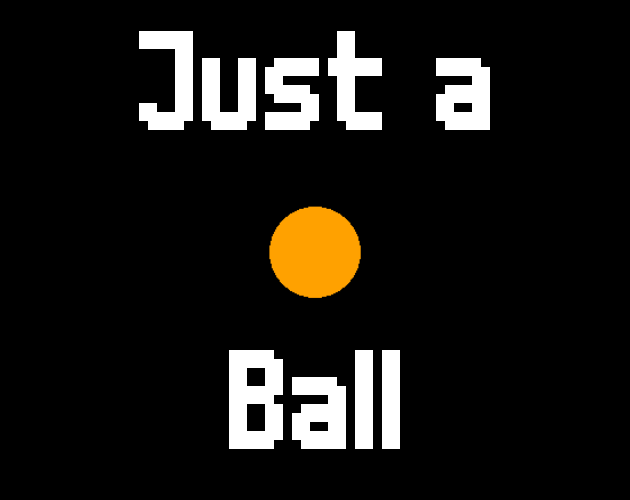
<style>
.page{position:relative;width:630px;height:500px;background:#000000}
.page>*{position:absolute;margin:0}
.t1{font:162px "m6x11plus";color:#ffffff}
</style>
<div class="page">
<p class="t1" style="left:139px;top:31px;width:351px;height:99px">Just a</p>
<p class="t1" style="left:229px;top:350px;width:171px;height:99px">Ball</p>
</div>
